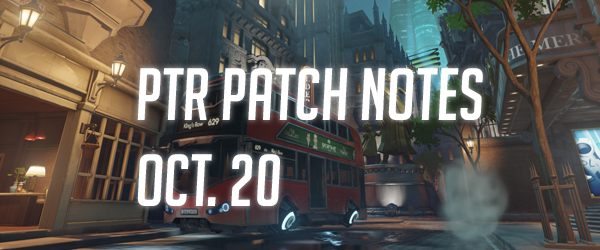
<style>
.page{position:relative;width:600px;height:250px}
.page>*{position:absolute;margin:0}
.t1{font:72px "BigNoodleTitling-Oblique";color:#ffffff}
</style>
<div class="page">
<p class="t1" style="left:137px;top:68px;width:346px;height:138px">ptr patch notes<br>oct. 20</p>
</div>
